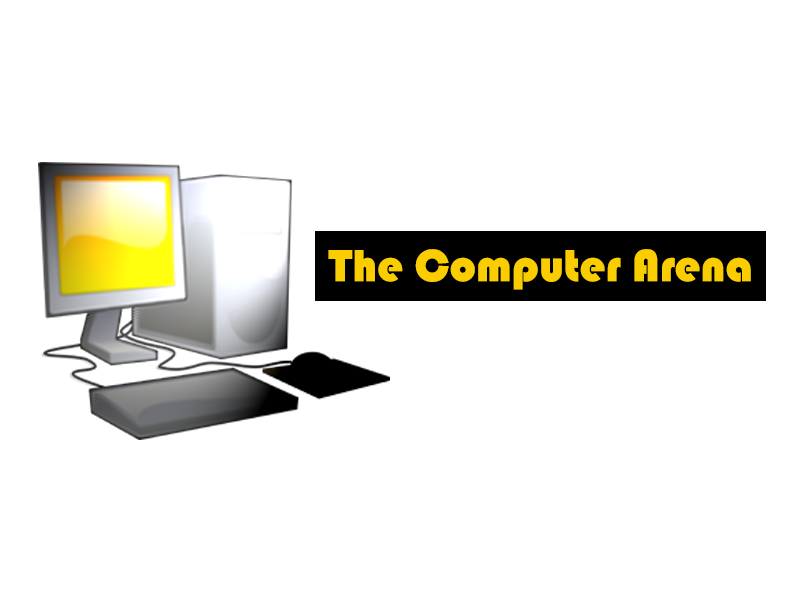
<style>
.page{position:relative;width:800px;height:600px;background:#ffffff}
.page>*{position:absolute;margin:0}
.t1{font:46.6px "Bauhaus93";color:#f9cd01}
</style>
<div class="page">
<p class="t1" style="left:328px;top:249px;width:423px;height:41px">The Computer Arena</p>
</div>
